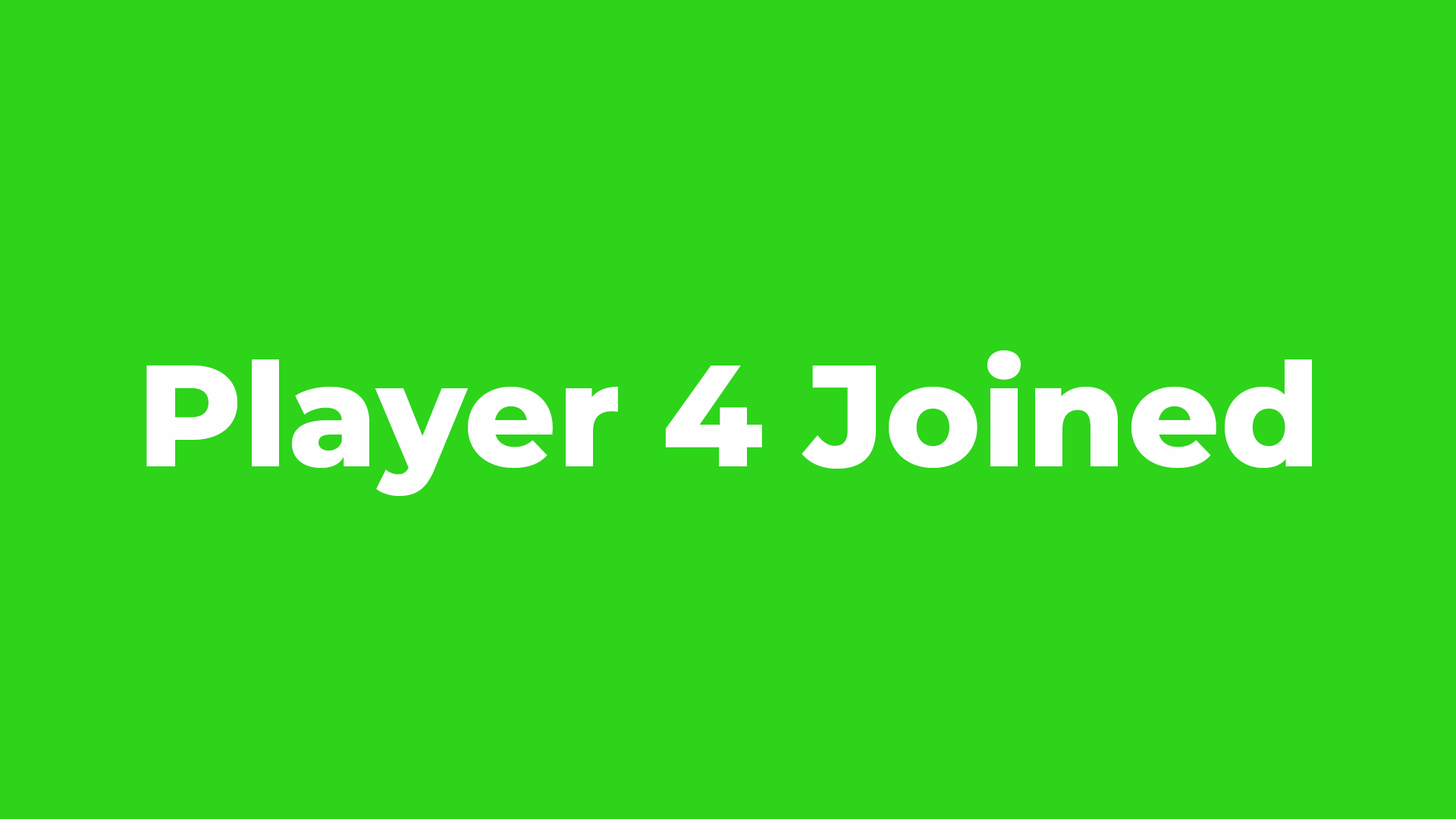
<style>
.page{position:relative;width:1456px;height:819px;background:#2dd41a}
.page>*{position:absolute;margin:0}
.t1{font:144.1px "Montserrat-ExtraBold";color:#fefefe}
</style>
<div class="page">
<p class="t1" style="left:146px;top:350px;width:1166px;height:146px">Player 4 Joined</p>
</div>
